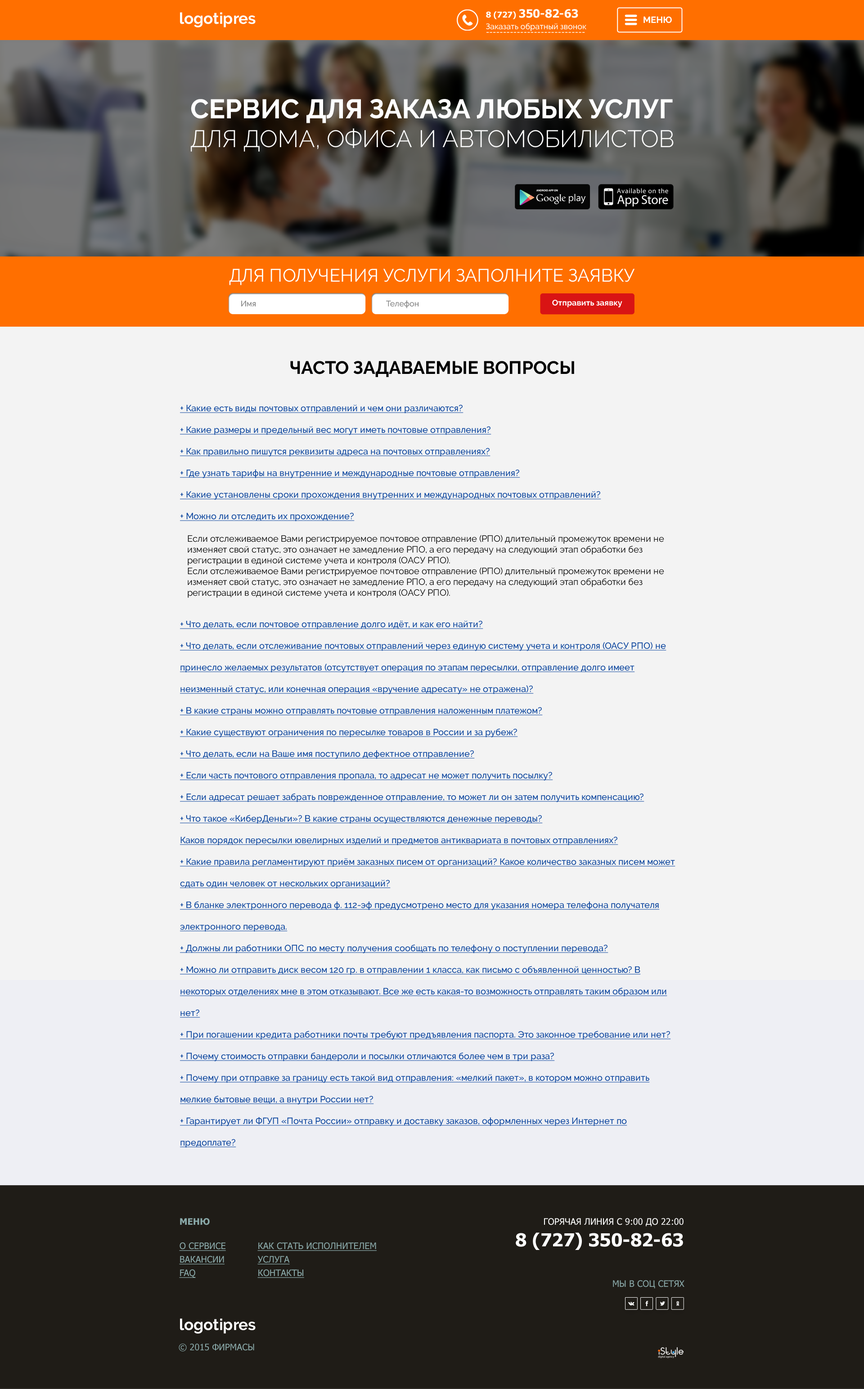
<style>
.page{position:relative;width:864px;height:1389px;background:#f3f3f3}
.page>*{position:absolute;margin:0}
.t1{font:15.8px "Raleway-Bold";color:#fefefe}
.t2{font:11.2px "Tahoma-Bold";color:#ffffff}
.t3{font:8.1px "Tahoma-Bold";color:#ffffff}
.t4{font:9px "Raleway-Bold";color:#ffffff;text-transform:uppercase}
.t5{font:8.1px "Raleway-Medium";color:#ffffff}
.t6{font:8.1px "Raleway-Medium"}
.t7{font:23.9px "Raleway-Light";color:#ffffff;text-transform:uppercase}
.t8{font:27px "Raleway-Bold";color:#ffffff;text-transform:uppercase}
.t9{font:18px "Raleway-Regular";color:#ffffff;text-transform:uppercase}
.t10{font:8.1px "Raleway-Medium";color:#808080}
.t11{font:8.1px "Raleway-Bold";color:#ffffff}
.t12{font:18px "Raleway-Bold";color:#000000;text-transform:uppercase}
.t13{font:9px/21.6px "Raleway-Medium";color:#08439d;text-decoration:underline}
.t14{font:9px "Raleway-Regular";color:#000000}
.t15{font:9px "Tahoma-Bold";color:#8aa9a9;text-transform:uppercase}
.t16{font:9px "Tahoma";color:#ffffff;text-transform:uppercase}
.t17{font:18px "Tahoma-Bold";color:#ffffff;text-transform:uppercase}
.t18{font:9px/13.5px "Tahoma";color:#8aa9a9;text-transform:uppercase;text-decoration:underline}
.t19{font:9px "Tahoma";color:#8aa9a9;text-transform:uppercase}
</style>
<div class="page">
<p class="t1" style="left:180px;top:12px;width:76px;height:15px">logotipres</p>
<p class="t2" style="left:486px;top:9px;width:92px;height:10px"><span class="t3">8 (727) </span>350-82-63</p>
<p class="t4" style="left:644px;top:16px;width:28px;height:7px">МЕНЮ</p>
<p class="t5" style="left:486px;top:23px;width:100px;height:8px">Заказать обратный звонок</p>
<p class="t6" style="left:486px;top:32px;width:99px;height:1px">-----------------------------</p>
<p class="t7" style="left:191px;top:99px;width:483px;height:53px"><span class="t8">СЕРВИС ДЛЯ ЗАКАЗА ЛЮБЫХ УСЛУГ <br></span>для дома, офиса и автомобилистов</p>
<p class="t9" style="left:229px;top:269px;width:406px;height:16px">Для получения услуги заполните заявку</p>
<p class="t10" style="left:241px;top:301px;width:15px;height:5px">Имя</p>
<p class="t10" style="left:386px;top:300px;width:32px;height:8px">Телефон</p>
<p class="t11" style="left:552px;top:300px;width:70px;height:7px">Отправить заявку</p>
<p class="t12" style="left:290px;top:361px;width:284px;height:16px">Часто задаваемые вопросы</p>
<p class="t13" style="left:180px;top:405px;width:495px;height:743px">+ Какие есть виды почтовых отправлений и чем они различаются?<br>+ Какие размеры и предельный вес могут иметь почтовые отправления?<br>+ Как правильно пишутся реквизиты адреса на почтовых отправлениях?<br>+ Где узнать тарифы на внутренние и международные почтовые отправления?<br>+ Какие установлены сроки прохождения внутренних и международных почтовых отправлений?<br>+ Можно ли отследить их прохождение?<br><br><br><br><br>+ Что делать, если почтовое отправление долго идёт, и как его найти?<br>+ Что делать, если отслеживание почтовых отправлений через единую систему учета и контроля (ОАСУ РПО) не принесло желаемых результатов (отсутствует операция по этапам пересылки, отправление долго имеет неизменный статус, или конечная операция «вручение адресату» не отражена)?<br>+ В какие страны можно отправлять почтовые отправления наложенным платежом?<br>+ Какие существуют ограничения по пересылке товаров в России и за рубеж?<br>+ Что делать, если на Ваше имя поступило дефектное отправление?<br>+ Если часть почтового отправления пропала, то адресат не может получить посылку?<br>+ Если адресат решает забрать поврежденное отправление, то может ли он затем получить компенсацию?<br>+ Что такое «КиберДеньги»? В какие страны осуществляются денежные переводы?<br>Каков порядок пересылки ювелирных изделий и предметов антиквариата в почтовых отправлениях?<br>+ Какие правила регламентируют приём заказных писем от организаций? Какое количество заказных писем может сдать один человек от нескольких организаций?<br>+ В бланке электронного перевода ф. 112-эф предусмотрено место для указания номера телефона получателя электронного перевода.<br>+ Должны ли работники ОПС по месту получения сообщать по телефону о поступлении перевода?<br>+ Можно ли отправить диск весом 120 гр. в отправлении 1 класса, как письмо с объявленной ценностью? В некоторых отделениях мне в этом отказывают. Все же есть какая-то возможность отправлять таким образом или нет?<br>+ При погашении кредита работники почты требуют предъявления паспорта. Это законное требование или нет?<br>+ Почему стоимость отправки бандероли и посылки отличаются более чем в три раза?<br>+ Почему при отправке за границу есть такой вид отправления: «мелкий пакет», в котором можно отправить мелкие бытовые вещи, а внутри России нет?<br>+ Гарантирует ли ФГУП «Почта России» отправку и доставку заказов, оформленных через Интернет по предоплате?</p>
<p class="t14" style="left:188px;top:535px;width:476px;height:31px">Если отслеживаемое Вами регистрируемое почтовое отправление (РПО) длительный промежуток времени не изменяет свой статус, это означает не замедление РПО, а его передачу на следующий этап обработки без регистрации в единой системе учета и контроля (ОАСУ РПО).</p>
<p class="t14" style="left:188px;top:567px;width:476px;height:31px">Если отслеживаемое Вами регистрируемое почтовое отправление (РПО) длительный промежуток времени не изменяет свой статус, это означает не замедление РПО, а его передачу на следующий этап обработки без регистрации в единой системе учета и контроля (ОАСУ РПО).</p>
<p class="t15" style="left:180px;top:1218px;width:30px;height:7px">МЕНЮ</p>
<p class="t16" style="left:516px;top:1218px;width:168px;height:32px;text-align:right">Горячая линия с 9:00 до 22:00<br><span class="t17">8 (727) 350-82-63</span></p>
<p class="t18" style="left:179px;top:1242px;width:47px;height:36px">О cервисе<br>Вакансии<br>faq</p>
<p class="t18" style="left:257px;top:1242px;width:120px;height:36px">Как стать исполнителем<br>услуга<br>контакты</p>
<p class="t19" style="left:613px;top:1280px;width:71px;height:9px">Мы в соц сетях</p>
<p class="t1" style="left:180px;top:1318px;width:76px;height:16px">logotipres</p>
<p class="t19" style="left:179px;top:1344px;width:75px;height:8px">© 2015 фирмасы</p>
</div>
